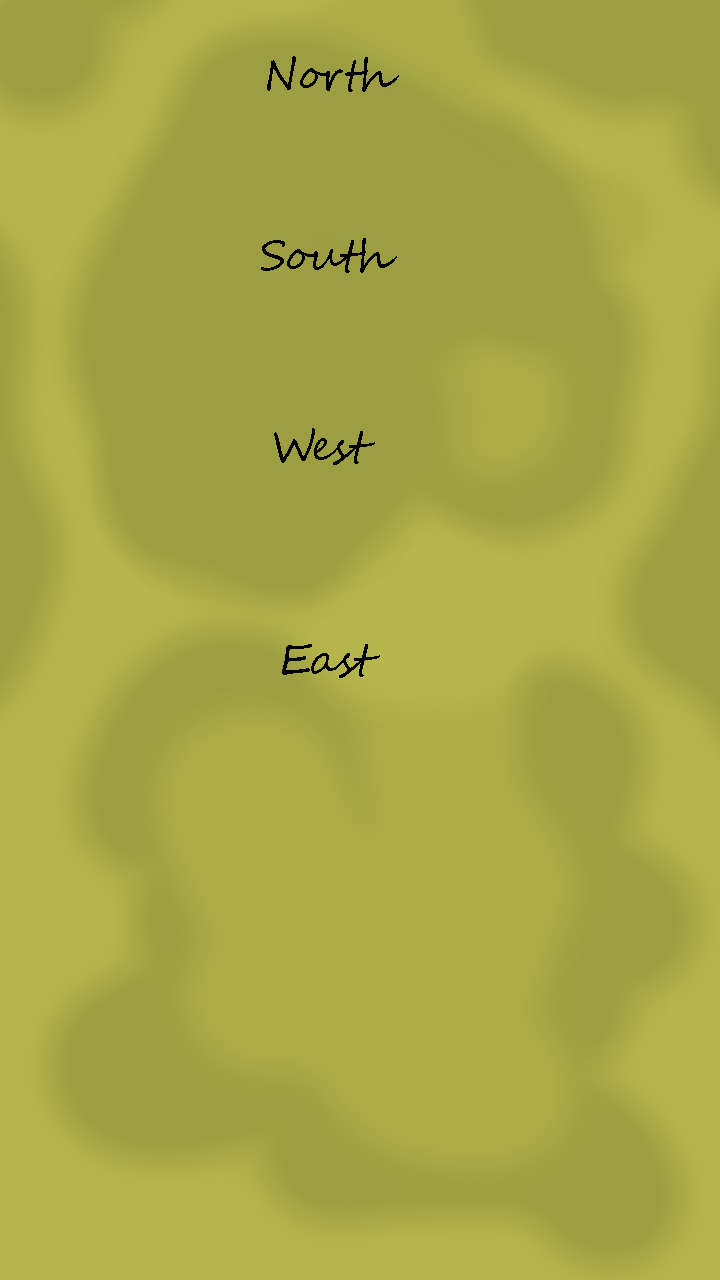
<style>
.page{position:relative;width:720px;height:1280px;background:#9d9e41}
.page>*{position:absolute;margin:0}
.t1{font:41.7px "SegoeScript";color:#000000}
</style>
<div class="page">
<p class="t1" style="left:267px;top:56px;width:132px;height:36px">North</p>
<p class="t1" style="left:261px;top:238px;width:136px;height:35px">South</p>
<p class="t1" style="left:274px;top:428px;width:101px;height:37px">West</p>
<p class="t1" style="left:282px;top:644px;width:98px;height:34px">East</p>
</div>
